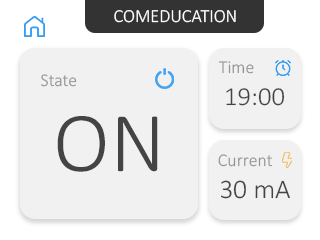
<style>
.page{position:relative;width:320px;height:240px;background:#f1f1f1}
.page>*{position:absolute;margin:0}
.t1{font:18.4px "Calibri-Light";color:#ffffff}
.t2{font:17.9px "Calibri-Light";color:#939393}
.t3{font:26px "Calibri-Light";color:#454343}
.t4{font:86.1px "Calibri-Light";color:#454343}
.t5{font:26.9px "Calibri-Light";color:#454343}
</style>
<div class="page">
<p class="t1" style="left:114px;top:10px;width:122px;height:13px">COMEDUCATION</p>
<p class="t2" style="left:218px;top:61px;width:36px;height:13px">Time</p>
<p class="t2" style="left:41px;top:74px;width:36px;height:13px">State</p>
<p class="t3" style="left:226px;top:88px;width:59px;height:18px">19:00</p>
<p class="t4" style="left:57px;top:116px;width:101px;height:56px">ON</p>
<p class="t2" style="left:218px;top:154px;width:55px;height:13px">Current</p>
<p class="t5" style="left:221px;top:180px;width:69px;height:19px">30 mA</p>
</div>
